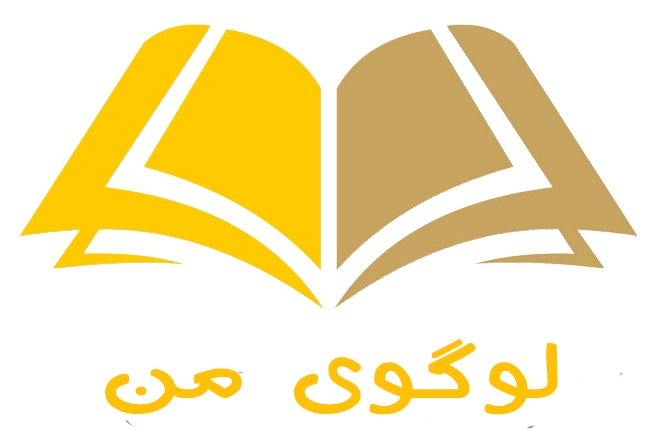
<style>
.page{position:relative;width:666px;height:430px;background:#ffffff}
.page>*{position:absolute;margin:0}
.t1{font:102.6px "BMahsa";color:#ffc107;font-weight:bold;scale:1.25 1}
</style>
<div class="page">
<p class="t1" style="left:105px;top:339px;width:453px;height:76px">لوگوی من</p>
</div>
